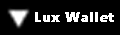
<style>
.page{position:relative;width:120px;height:35px;background:#000000}
.page>*{position:absolute;margin:0}
.t1{font:14px "Ebrima-Bold";color:#ffffff;font-weight:bold}
</style>
<div class="page">
<p class="t1" style="left:35px;top:12px;width:79px;height:10px">Lux Wallet</p>
</div>
